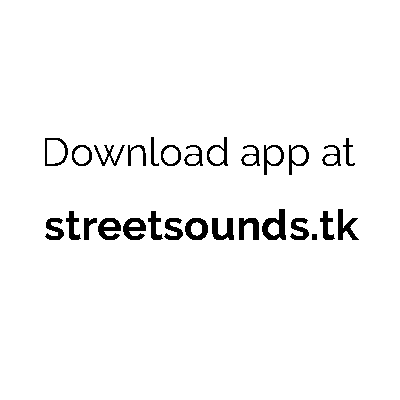
<style>
.page{position:relative;width:400px;height:400px;background:#ffffff}
.page>*{position:absolute;margin:0}
.t1{font:39.9px "Raleway-Regular";color:#000000}
.t2{font:42.2px "Raleway-Bold";color:#000000}
</style>
<div class="page">
<p class="t1" style="left:45px;top:137px;width:310px;height:38px">Download app at</p>
<p class="t2" style="left:45px;top:209px;width:314px;height:31px">streetsounds.tk</p>
</div>
